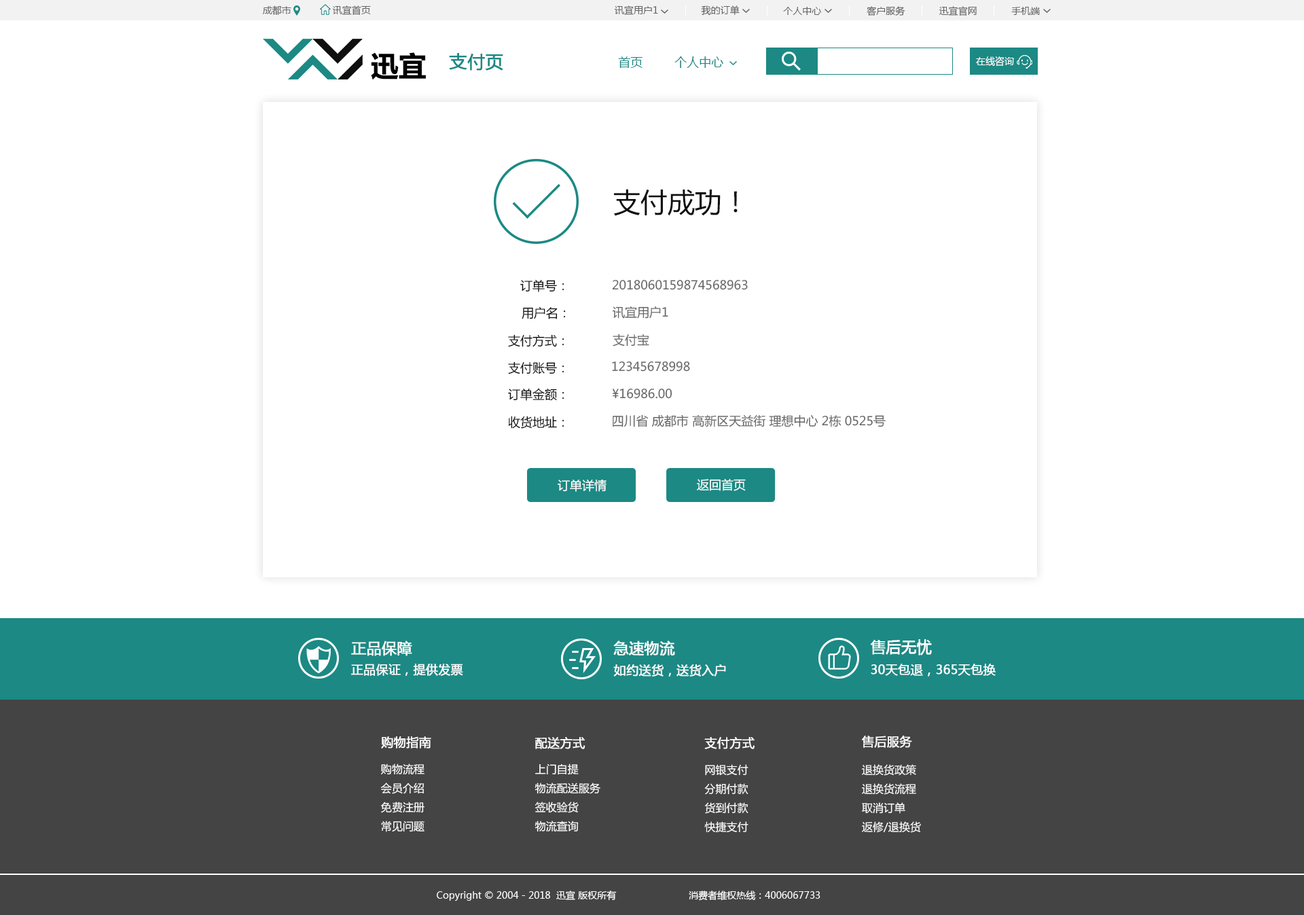
<style>
.page{position:relative;width:1304px;height:915px;background:#ffffff}
.page>*{position:absolute;margin:0}
.t1{font:9.5px "MicrosoftYaHei";color:#666666}
.t2{font:17.7px "MicrosoftYaHei";color:#1c8984;font-weight:bold}
.t3{font:12.2px "MicrosoftYaHei";color:#1c8984}
.t4{font:9.5px "MicrosoftYaHei";color:#ffffff}
.t5{font:27.2px "MicrosoftYaHei";color:#0f0f0f}
.t6{font:12.2px "MicrosoftYaHei";color:#0f0f0f}
.t7{font:12.2px "MicrosoftYaHei";color:#666666}
.t8{font:12.2px "MicrosoftYaHei";color:#ffffff}
.t9{font:14.9px "MicrosoftYaHei";color:#ffffff;font-weight:bold}
.t10{font:12.2px "MicrosoftYaHei";color:#ffffff;font-weight:bold}
.t11{font:10.9px "MicrosoftYaHei";color:#ffffff}
</style>
<div class="page">
<p class="t1" style="left:262px;top:5px;width:29px;height:10px">成都市</p>
<p class="t1" style="left:332px;top:5px;width:39px;height:10px">讯宜首页</p>
<p class="t1" style="left:615px;top:5px;width:43px;height:10px">讯宜用户1</p>
<p class="t1" style="left:701px;top:5px;width:38px;height:11px">我的订单</p>
<p class="t1" style="left:783px;top:7px;width:38px;height:8px">个人中心</p>
<p class="t1" style="left:866px;top:6px;width:39px;height:10px">客户服务</p>
<p class="t1" style="left:939px;top:6px;width:37px;height:10px">迅宜官网</p>
<p class="t1" style="left:1011px;top:7px;width:29px;height:8px">手机端</p>
<p class="t2" style="left:449px;top:53px;width:54px;height:18px">支付页</p>
<p class="t3" style="left:618px;top:56px;width:24px;height:12px">首页</p>
<p class="t3" style="left:674px;top:56px;width:49px;height:12px">个人中心</p>
<p class="t4" style="left:976px;top:56px;width:38px;height:11px">在线咨询</p>
<p class="t5" style="left:614px;top:189px;width:123px;height:27px">支付成功！</p>
<p class="t6" style="left:520px;top:280px;width:44px;height:12px">订单号：</p>
<p class="t7" style="left:612px;top:280px;width:136px;height:10px">2018060159874568963</p>
<p class="t6" style="left:521px;top:307px;width:45px;height:12px">用户名：</p>
<p class="t7" style="left:612px;top:306px;width:56px;height:12px">讯宜用户1</p>
<p class="t6" style="left:508px;top:334px;width:56px;height:13px">支付方式：</p>
<p class="t7" style="left:612px;top:333px;width:37px;height:13px">支付宝</p>
<p class="t6" style="left:508px;top:361px;width:56px;height:13px">支付账号：</p>
<p class="t7" style="left:612px;top:361px;width:78px;height:10px">12345678998</p>
<p class="t6" style="left:508px;top:388px;width:56px;height:13px">订单金额：</p>
<p class="t7" style="left:612px;top:388px;width:60px;height:11px">¥16986.00</p>
<p class="t6" style="left:508px;top:416px;width:56px;height:12px">收货地址：</p>
<p class="t7" style="left:612px;top:414px;width:273px;height:13px">四川省 成都市 高新区天益街 理想中心 2栋 0525号</p>
<p class="t8" style="left:557px;top:479px;width:49px;height:13px">订单详情</p>
<p class="t8" style="left:697px;top:479px;width:49px;height:12px">返回首页</p>
<p class="t9" style="left:351px;top:640px;width:61px;height:16px">正品保障</p>
<p class="t9" style="left:613px;top:640px;width:62px;height:16px">急速物流</p>
<p class="t9" style="left:870px;top:639px;width:62px;height:16px">售后无忧</p>
<p class="t10" style="left:351px;top:663px;width:112px;height:13px">正品保证，提供发票</p>
<p class="t10" style="left:613px;top:664px;width:113px;height:12px">如约送货，送货入户</p>
<p class="t10" style="left:871px;top:663px;width:124px;height:13px">30天包退，365天包换</p>
<p class="t10" style="left:381px;top:736px;width:50px;height:12px">购物指南</p>
<p class="t10" style="left:535px;top:737px;width:50px;height:12px">配送方式</p>
<p class="t10" style="left:704px;top:737px;width:50px;height:12px">支付方式</p>
<p class="t10" style="left:862px;top:735px;width:50px;height:13px">售后服务</p>
<p class="t11" style="left:381px;top:763px;width:43px;height:69px">购物流程<br>会员介绍<br>免费注册<br>常见问题</p>
<p class="t11" style="left:534px;top:763px;width:66px;height:69px">上门自提<br>物流配送服务<br>签收验货<br>物流查询</p>
<p class="t11" style="left:704px;top:764px;width:44px;height:68px">网银支付<br>分期付款<br>货到付款<br>快捷支付</p>
<p class="t11" style="left:862px;top:764px;width:59px;height:68px">退换货政策<br>退换货流程<br>取消订单<br>返修/退换货</p>
<p class="t4" style="left:437px;top:890px;width:180px;height:10px">Copyright © 2004 - 2018  迅宜 版权所有</p>
<p class="t4" style="left:689px;top:890px;width:131px;height:10px">消费者维权热线：4006067733</p>
</div>
